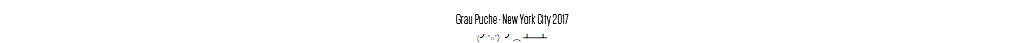
<style>
.page{position:relative;width:1024px;height:43px;background:#ffffff}
.page>*{position:absolute;margin:0}
.t1{font:14px "Tungsten-Light";color:#010101}
</style>
<div class="page">
<p class="t1" style="left:456px;top:14px;width:113px;height:12px">Grau Puche · New York City 2017</p>
</div>
